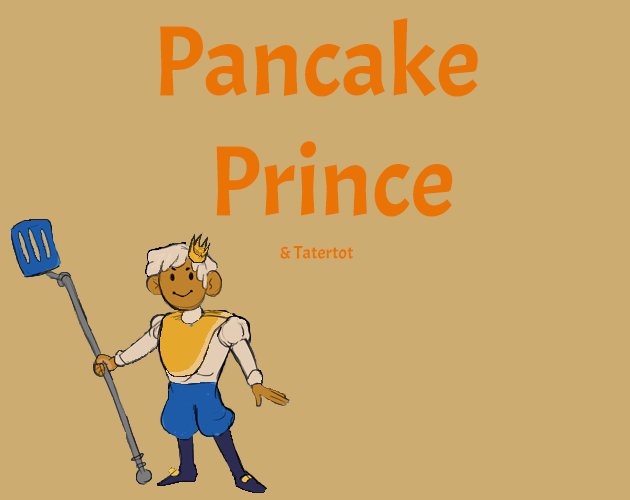
<style>
.page{position:relative;width:630px;height:500px;background:#ccac71}
.page>*{position:absolute;margin:0}
.t1{font:100px "Acme-Regular";color:#e97305}
.t2{font:18px "Acme-Regular";color:#e97305}
</style>
<div class="page">
<p class="t1" style="left:160px;top:18px;width:318px;height:241px;text-align:center">Pancake <br>  Prince<br><span class="t2"><br>&amp; Tatertot</span></p>
</div>
